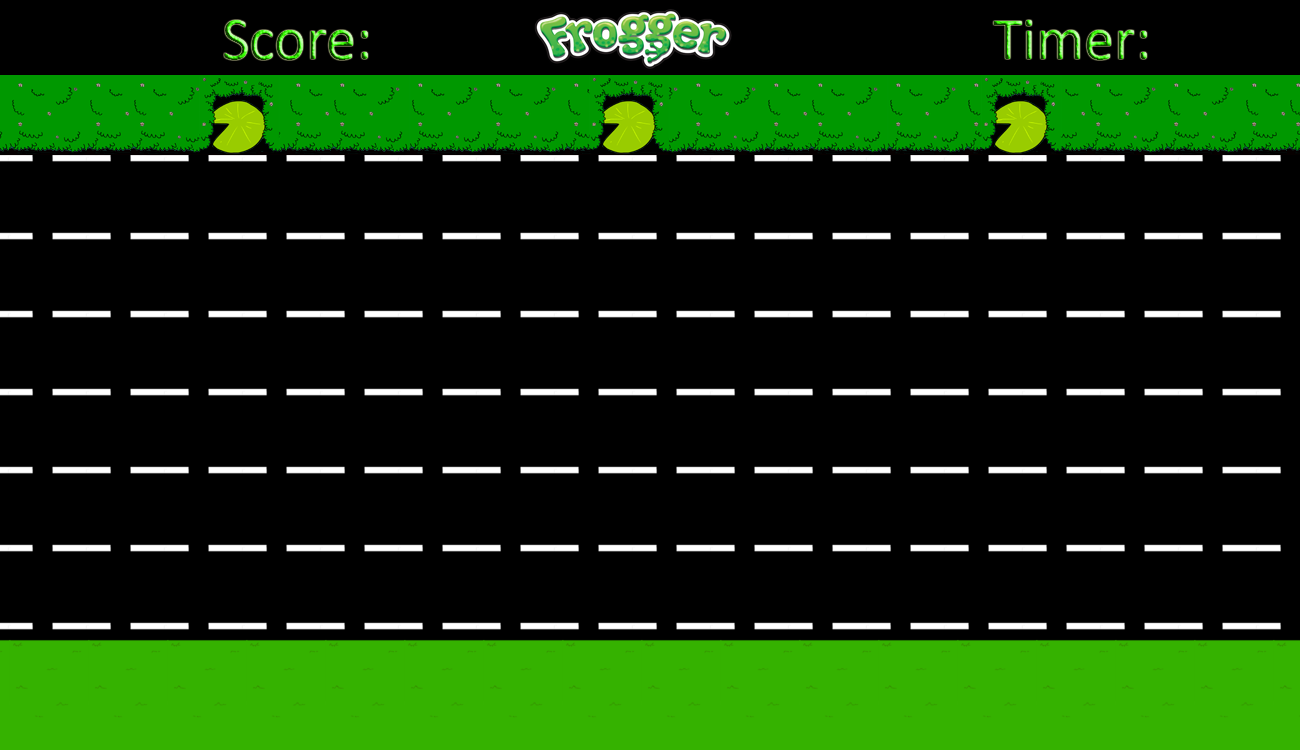
<style>
.page{position:relative;width:1300px;height:750px;background:#000000}
.page>*{position:absolute;margin:0}
.t1{font:60px "Calibri"}
</style>
<div class="page">
<p class="t1" style="left:224px;top:20px;width:144px;height:40px">Score:</p>
<p class="t1" style="left:993px;top:20px;width:154px;height:40px">Timer:</p>
</div>
